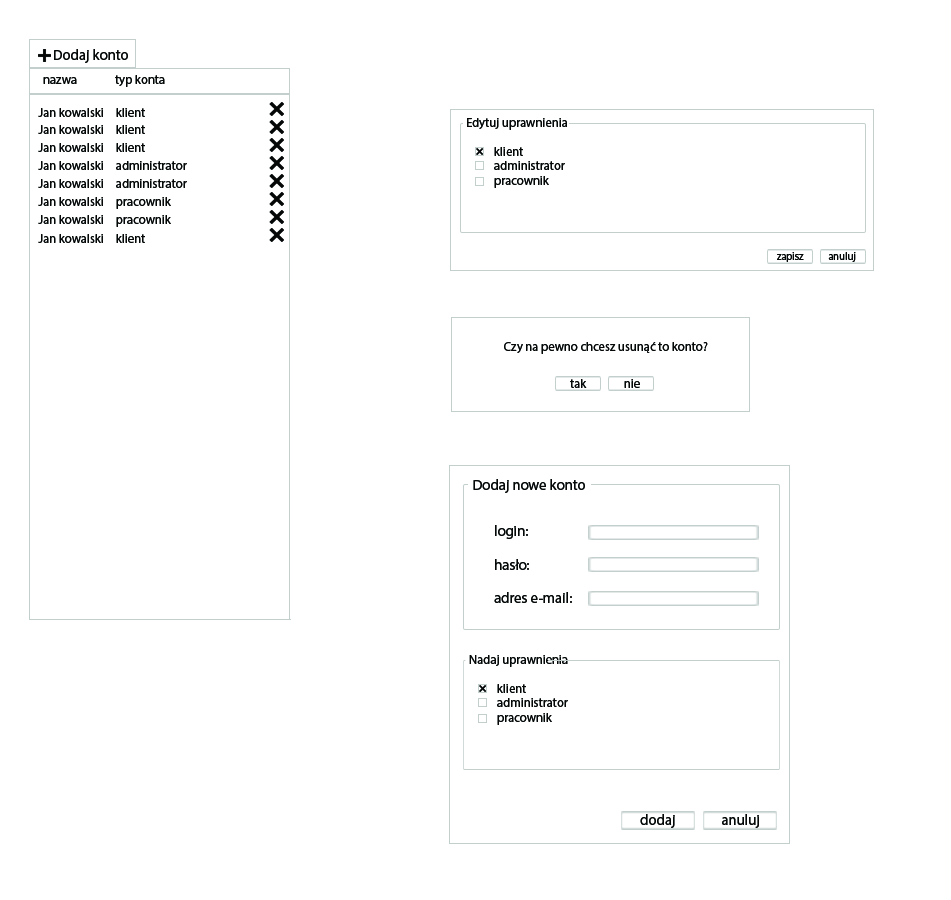
<style>
.page{position:relative;width:951px;height:900px;background:#ffffff}
.page>*{position:absolute;margin:0}
.t1{font:14.7px "MyriadPro-Regular";color:#060808}
.t2{font:12.6px "MyriadPro-Regular";color:#060808}
.t3{font:10.5px "MyriadPro-Regular";color:#060808}
</style>
<div class="page">
<p class="t1" style="left:54px;top:49px;width:74px;height:14px">Dodaj konto</p>
<p class="t2" style="left:43px;top:75px;width:122px;height:12px">nazwa  typ konta</p>
<p class="t2" style="left:38px;top:108px;width:107px;height:9px">Jan kowalski   klient</p>
<p class="t2" style="left:38px;top:125px;width:107px;height:9px">Jan kowalski   klient</p>
<p class="t2" style="left:467px;top:118px;width:100px;height:12px">Edytuj uprawnienia</p>
<p class="t2" style="left:38px;top:143px;width:107px;height:9px">Jan kowalski   klient</p>
<p class="t2" style="left:494px;top:147px;width:71px;height:41px">klient<br>administrator<br>pracownik</p>
<p class="t2" style="left:38px;top:161px;width:149px;height:9px">Jan kowalski   administrator</p>
<p class="t2" style="left:38px;top:179px;width:149px;height:9px">Jan kowalski   administrator</p>
<p class="t2" style="left:38px;top:197px;width:133px;height:12px">Jan kowalski   pracownik</p>
<p class="t2" style="left:38px;top:215px;width:133px;height:12px">Jan kowalski   pracownik</p>
<p class="t2" style="left:38px;top:234px;width:107px;height:9px">Jan kowalski   klient</p>
<p class="t3" style="left:777px;top:252px;width:79px;height:10px">zapisz        anuluj</p>
<p class="t2" style="left:504px;top:342px;width:204px;height:12px">Czy na pewno chcesz usunąć to konto?</p>
<p class="t2" style="left:570px;top:379px;width:70px;height:9px">tak              nie</p>
<p class="t1" style="left:473px;top:479px;width:112px;height:14px">Dodaj nowe konto</p>
<p class="t1" style="left:494px;top:525px;width:78px;height:78px">login:<br><br>hasło:<br><br>adres e-mail:</p>
<p class="t2" style="left:469px;top:655px;width:99px;height:12px">Nadaj uprawnienia</p>
<p class="t2" style="left:497px;top:684px;width:71px;height:41px">klient<br>administrator<br>pracownik</p>
<p class="t1" style="left:640px;top:814px;width:35px;height:14px">dodaj</p>
<p class="t1" style="left:722px;top:814px;width:37px;height:14px">anuluj</p>
</div>
